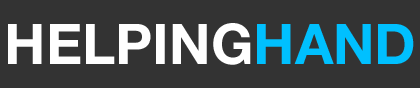
<style>
.page{position:relative;width:420px;height:88px;background:#333333}
.page>*{position:absolute;margin:0}
.t1{font:56px "HelveticaNeue-Bold";color:#ffffff}
.t2{font:56px "HelveticaNeue-Bold";color:#00c0ff}
</style>
<div class="page">
<p class="t1" style="left:8px;top:23px;width:406px;height:42px">HELPING<span class="t2">HAND</span></p>
</div>
